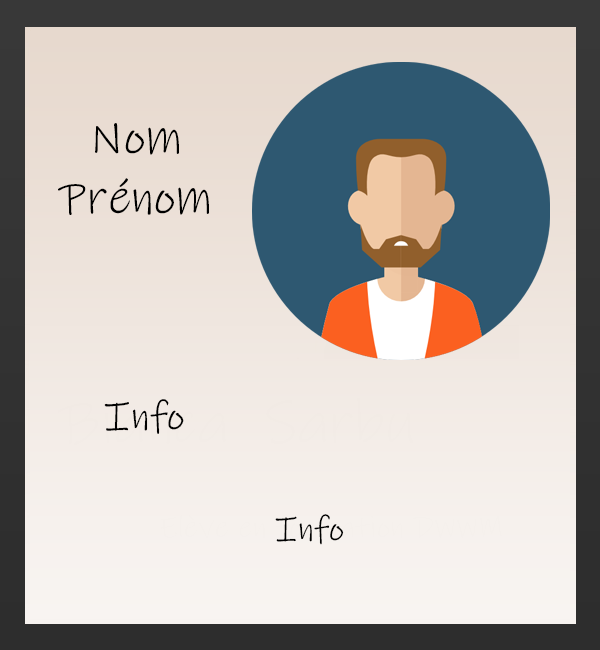
<style>
.page{position:relative;width:600px;height:650px}
.page>*{position:absolute;margin:0}
.t1{font:50px "InkFree";color:#000000}
.t2{font:40.7px "InkFree";color:#000000}
.t3{font:35px "InkFree";color:#000000}
</style>
<div class="page">
<p class="t1" style="left:58px;top:123px;width:151px;height:92px;text-align:center">Nom<br>Prénom</p>
<p class="t2" style="left:104px;top:399px;width:80px;height:35px">Info</p>
<p class="t3" style="left:275px;top:514px;width:69px;height:31px">Info</p>
</div>
